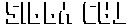
<style>
.page{position:relative;width:136px;height:24px;background:#ffffff}
.page>*{position:absolute;margin:0}
.t1{font:26.2px "8BITWONDERNominal";scale:0.59 1}
.t2{font:26.2px "8BITWONDERNominal";color:#ffffff;scale:0.59 1}
</style>
<div class="page">
<p class="t1" style="left:6px;top:2px;width:120px;height:22px">Zippy Cat</p>
<p class="t2" style="left:8px;top:1px;width:120px;height:22px">Zippy Cat</p>
</div>
